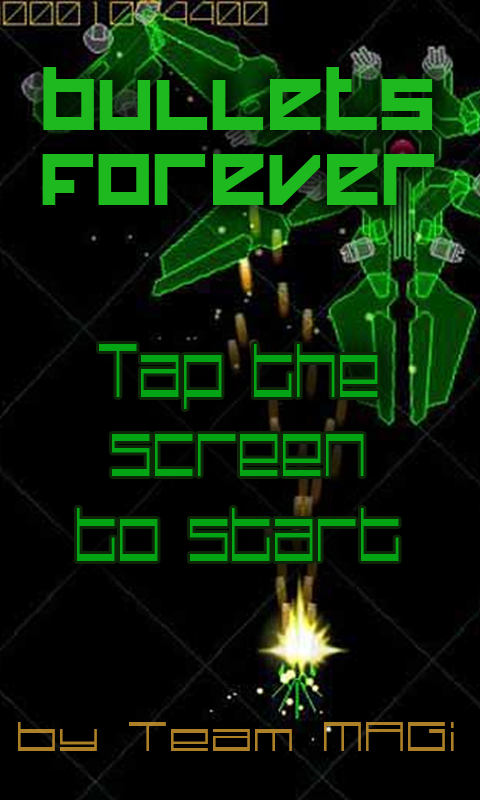
<style>
.page{position:relative;width:480px;height:800px;background:#000000}
.page>*{position:absolute;margin:0}
.t1{font:62.7px "HappyKiller";color:#1eb81f}
.t2{font:117.5px "Technoidone";color:#03a515;scale:0.46 1}
.t3{font:64.7px "Technoidone";color:#ad8027;scale:0.82 1}
</style>
<div class="page">
<p class="t1" style="left:42px;top:67px;width:393px;height:138px;text-align:center">bullets<br>forever</p>
<p class="t2" style="left:99px;top:344px;width:279px;height:65px">Tap the</p>
<p class="t2" style="left:112px;top:434px;width:252px;height:42px">screen</p>
<p class="t2" style="left:77px;top:508px;width:322px;height:53px">to start</p>
<p class="t3" style="left:18px;top:722px;width:436px;height:29px">by Team MAGi</p>
</div>
